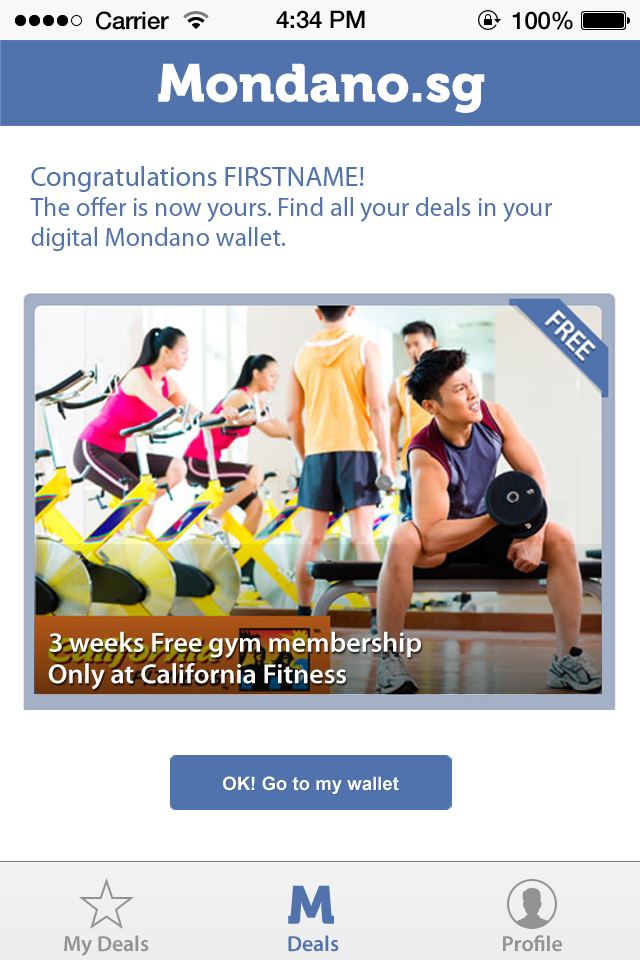
<style>
.page{position:relative;width:640px;height:960px;background:#ffffff}
.page>*{position:absolute;margin:0}
.t1{font:24px "HelveticaNeue-Medium";color:#000000}
.t2{font:53.3px "Museo900-Regular";color:#ffffff}
.t3{font:26px/30px "MyriadPro-Regular";color:#5173ad}
.t4{font:28px/30px "MyriadPro-Regular";color:#5173ad}
.t5{font:28px "MyriadPro-Semibold";color:#ffffff}
.t6{font:26px "Utsaah-Bold";color:#ffffff}
.t7{font:53.3px "Museo900-Regular";color:#5173ad}
.t8{font:22px "MyriadPro-Semibold";color:#929292}
.t9{font:22px "MyriadPro-Semibold";color:#5173ad}
</style>
<div class="page">
<p class="t1" style="left:96px;top:11px;width:73px;height:19px">Carrier</p>
<p class="t1" style="left:276px;top:10px;width:89px;height:19px">4:34 PM</p>
<p class="t1" style="left:512px;top:11px;width:61px;height:19px">100%</p>
<p class="t2" style="left:158px;top:63px;width:327px;height:50px">Mondano.sg</p>
<p class="t3" style="left:30px;top:166px;width:522px;height:85px"><span class="t4">Congratulations FIRSTNAME!<br></span>The offer is now yours. Find all your deals in your <br>digital Mondano wallet.</p>
<p class="t5" style="left:49px;top:631px;width:372px;height:27px">3 weeks Free gym membership</p>
<p class="t5" style="left:48px;top:663px;width:298px;height:27px">Only at California Fitness</p>
<p class="t6" style="left:223px;top:776px;width:176px;height:18px">OK! Go to my wallet</p>
<p class="t7" style="left:288px;top:885px;width:46px;height:39px">M</p>
<p class="t8" style="left:64px;top:935px;width:85px;height:21px">My Deals</p>
<p class="t9" style="left:288px;top:935px;width:51px;height:17px">Deals</p>
<p class="t8" style="left:503px;top:935px;width:59px;height:17px">Profile</p>
</div>
